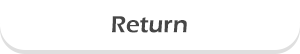
<style>
.page{position:relative;width:300px;height:54px;background:#ffffff}
.page>*{position:absolute;margin:0}
.t1{font:24px "ErasITC-Demi";color:#464646}
</style>
<div class="page">
<p class="t1" style="left:112px;top:16px;width:75px;height:17px">Return</p>
</div>
